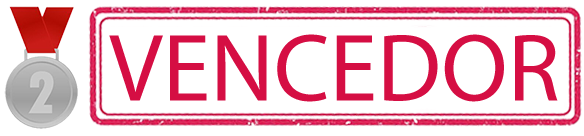
<style>
.page{position:relative;width:584px;height:136px;background:#ffffff}
.page>*{position:absolute;margin:0}
.t1{font:96.4px "MyriadPro-Regular";color:#d50e43}
</style>
<div class="page">
<p class="t1" style="left:109px;top:34px;width:449px;height:68px">VENCEDOR</p>
</div>
